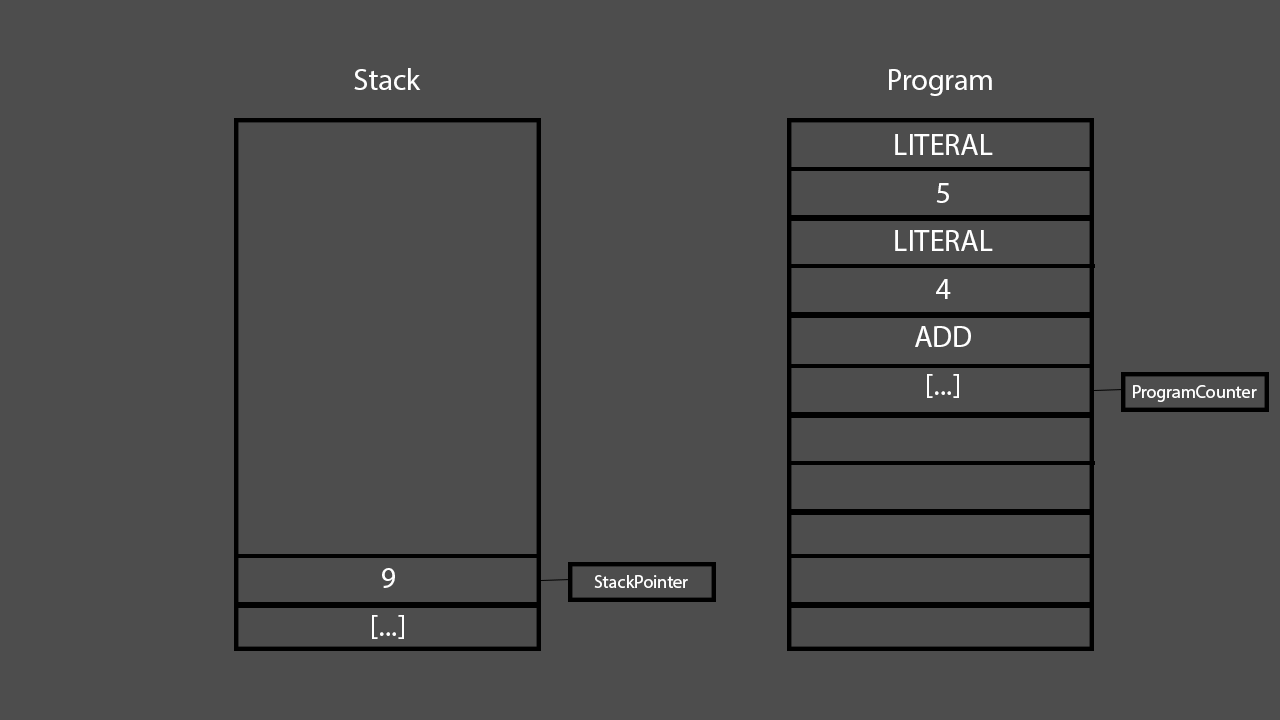
<style>
.page{position:relative;width:1280px;height:720px;background:#4d4d4d}
.page>*{position:absolute;margin:0}
.t1{font:30px "MyriadPro-Regular";color:#ffffff}
.t2{font:30px/48px "MyriadPro-Regular";color:#ffffff}
.t3{font:18px "MyriadPro-Regular";color:#ffffff}
</style>
<div class="page">
<p class="t1" style="left:354px;top:68px;width:67px;height:22px">Stack</p>
<p class="t1" style="left:889px;top:69px;width:103px;height:27px">Program</p>
<p class="t2" style="left:895px;top:134px;width:98px;height:264px;text-align:center">LITERAL<br>5<br>LITERAL<br>4<br>ADD<br>[...]</p>
<p class="t3" style="left:1133px;top:385px;width:124px;height:17px">ProgramCounter</p>
<p class="t2" style="left:372px;top:568px;width:32px;height:71px;text-align:center">9<br>[...]</p>
<p class="t3" style="left:594px;top:575px;width:94px;height:13px">StackPointer</p>
</div>
